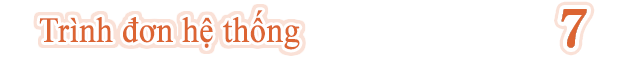
<style>
.page{position:relative;width:624px;height:64px;background:#ffffff}
.page>*{position:absolute;margin:0}
.t1{font:35.2px "TimesNewRomanPSMT";color:#dc6432;font-weight:bold;scale:0.91 1}
</style>
<div class="page">
<p class="t1" style="left:39px;top:10px;width:261px;height:40px">Trình đơn hệ thống</p>
</div>
